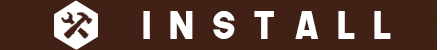
<style>
.page{position:relative;width:440px;height:50px;background:#412115}
.page>*{position:absolute;margin:0}
.t1{font:37.5px "TheNextFont";letter-spacing:0.48em;color:#ffffff}
</style>
<div class="page">
<p class="t1" style="left:143px;top:11px;width:248px;height:28px">INSTALL</p>
</div>
